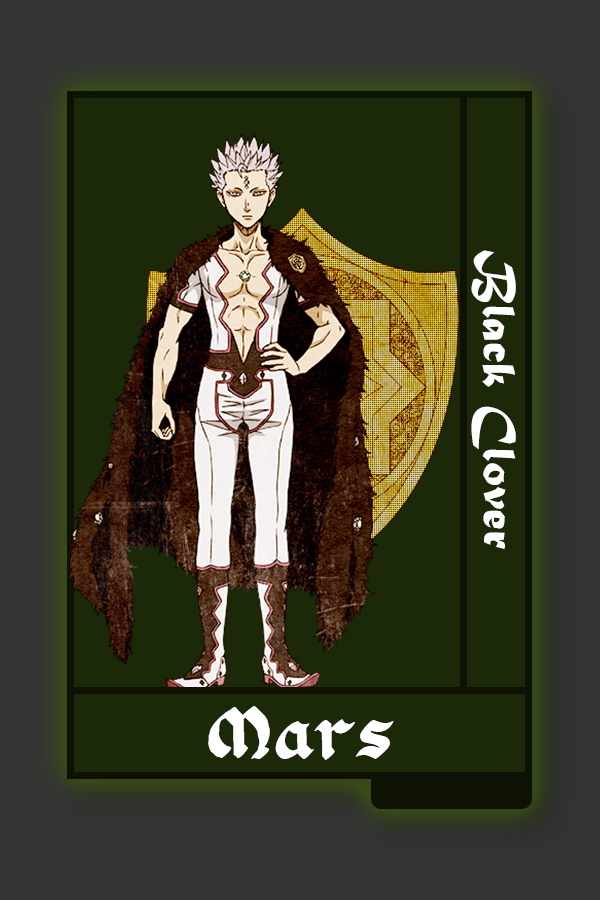
<style>
.page{position:relative;width:600px;height:900px;background:#1b2908}
.page>*{position:absolute;margin:0}
.t1{font:48.8px "MaturaMTScriptCapitals";color:#ffffff}
.t2{font:64.6px "FloranteatLaura";color:#ffffff}
</style>
<div class="page">
<p class="t1" style="left:471px;top:250px;width:45px;height:299px;rotate:90deg">Black Clover</p>
<p class="t2" style="left:208px;top:706px;width:186px;height:54px">Mars</p>
</div>
